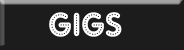
<style>
.page{position:relative;width:184px;height:50px;background:#1c1c1c}
.page>*{position:absolute;margin:0}
.t1{font:33.3px "AdamGorry-Lights";color:#ffffff}
</style>
<div class="page">
<p class="t1" style="left:49px;top:12px;width:73px;height:25px">gigs</p>
</div>
